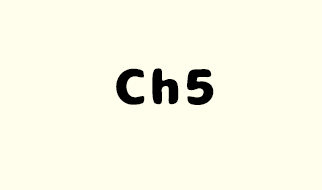
<style>
.page{position:relative;width:322px;height:190px;background:#fffdec}
.page>*{position:absolute;margin:0}
.t1{font:50px "07NikumaruFont";letter-spacing:0.08em;color:#000000}
</style>
<div class="page">
<p class="t1" style="left:116px;top:68px;width:98px;height:37px">Ch5</p>
</div>
